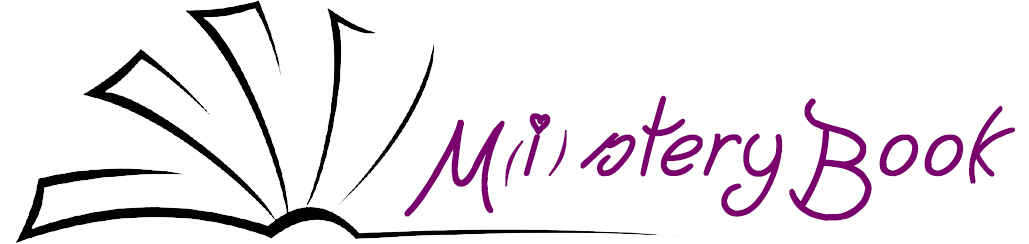
<style>
.page{position:relative;width:1029px;height:244px;background:#ffffff}
.page>*{position:absolute;margin:0}
.t1{font:142px "Cheese-Cake";letter-spacing:0.025em;color:#7a006d;font-weight:bold}
.t2{font:59.2px "KunstlerScript";letter-spacing:0.025em;color:#7a006d;font-weight:bold}
</style>
<div class="page">
<p class="t1" style="left:404px;top:95px;width:611px;height:126px">M i steryBook</p>
<p class="t2" style="left:505px;top:130px;width:62px;height:57px;rotate:-13deg">(  )</p>
</div>
